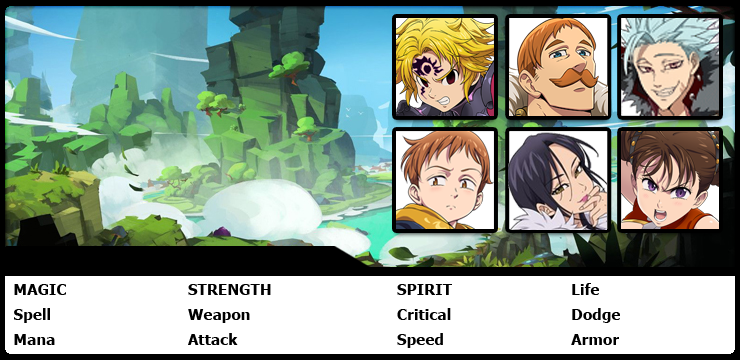
<style>
.page{position:relative;width:740px;height:360px;background:#ffffff}
.page>*{position:absolute;margin:0}
.t1{font:15.3px/25px "Tahoma-Bold";color:#000000}
</style>
<div class="page">
<p class="t1" style="left:14px;top:283px;width:606px;height:65px">MAGIC     STRENGTH     SPIRIT     Life <br>Spell     Weapon      Critical     Dodge <br>Mana    Attack      Speed     Armor</p>
</div>
